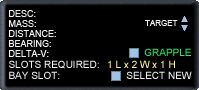
<style>
.page{position:relative;width:199px;height:90px;background:#000000}
.page>*{position:absolute;margin:0}
.t1{font:9px/10px "ArialMT";color:#eeeeee}
.t2{font:8px "ArialMT";color:#eeeeee;font-variant:small-caps}
.t3{font:10px "ArialMT";color:#35de69}
.t4{font:10px "ArialMT";color:#eeeeee}
.t5{font:10px "ArialMT";color:#fbf28a}
</style>
<div class="page">
<p class="t1" style="left:9px;top:10px;width:47px;height:47px">DESC:<br>MASS:<br>DISTANCE: <br>BEARING:<br>DELTA-V:</p>
<p class="t2" style="left:145px;top:20px;width:33px;height:6px">TARGET</p>
<p class="t3" style="left:144px;top:48px;width:47px;height:8px">GRAPPLE</p>
<p class="t4" style="left:9px;top:60px;width:90px;height:9px">SLOTS REQUIRED:</p>
<p class="t5" style="left:108px;top:60px;width:67px;height:8px">1 L x 2 W x 1 H</p>
<p class="t4" style="left:9px;top:71px;width:51px;height:8px">BAY SLOT:</p>
<p class="t4" style="left:126px;top:71px;width:66px;height:8px">SELECT NEW</p>
</div>
